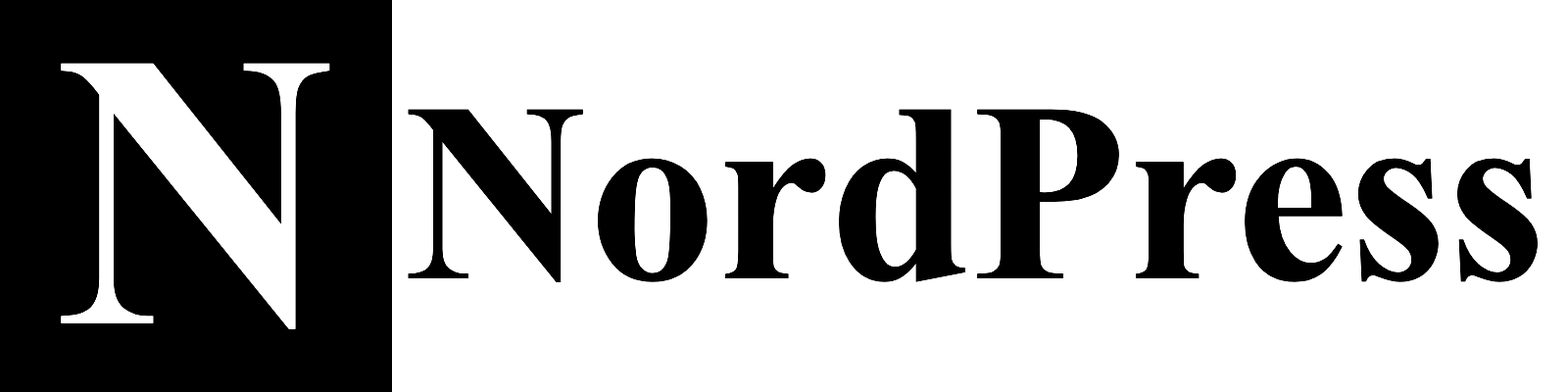
<style>
.page{position:relative;width:1568px;height:392px;background:#ffffff}
.page>*{position:absolute;margin:0}
.t1{font:254.8px "TimesNewRomanPS-BoldMT";color:#000000}
</style>
<div class="page">
<p class="t1" style="left:408px;top:109px;width:1130px;height:173px">NordPress</p>
</div>
